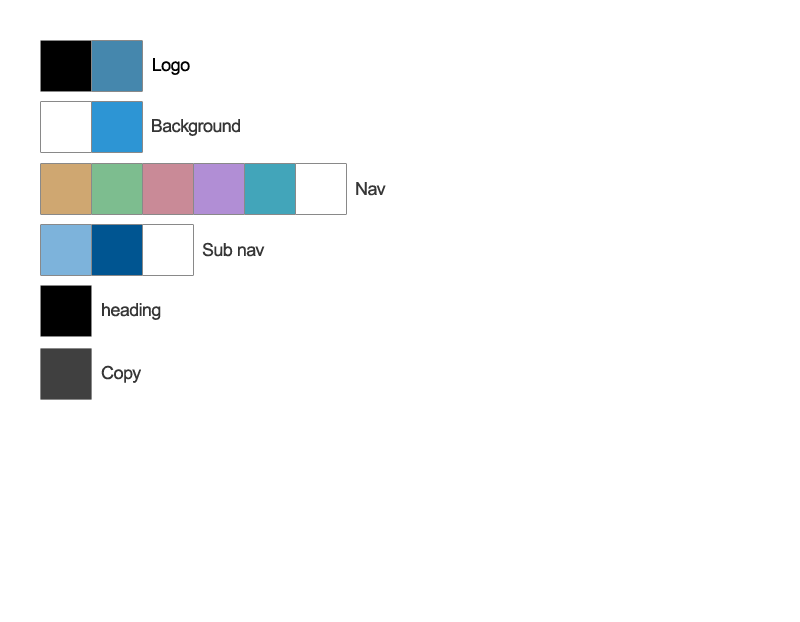
<style>
.page{position:relative;width:800px;height:622px;background:#ffffff}
.page>*{position:absolute;margin:0}
.t1{font:18px "ArialMT";letter-spacing:-0.025em;color:#000000}
.t2{font:18px "ArialMT";letter-spacing:-0.025em;color:#363636}
</style>
<div class="page">
<p class="t1" style="left:153px;top:58px;width:37px;height:17px">Logo</p>
<p class="t2" style="left:152px;top:119px;width:88px;height:17px">Background</p>
<p class="t2" style="left:356px;top:182px;width:30px;height:14px">Nav</p>
<p class="t2" style="left:202px;top:242px;width:63px;height:15px">Sub nav</p>
<p class="t2" style="left:102px;top:303px;width:59px;height:17px">heading</p>
<p class="t2" style="left:101px;top:365px;width:40px;height:18px">Copy</p>
</div>
